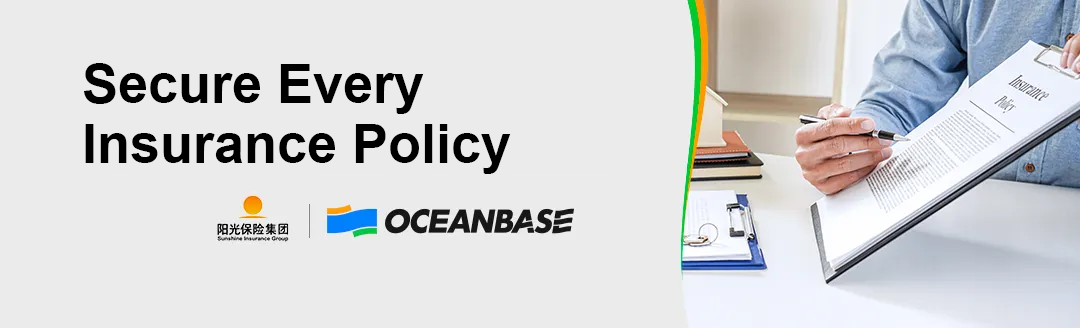
<style>
.page{position:relative;width:1080px;height:328px;background:#ebebeb}
.page>*{position:absolute;margin:0}
.t1{font:54px/60px "Arial-BoldMT";color:#000000}
</style>
<div class="page">
<p class="t1" style="left:84px;top:63px;width:427px;height:111px">Secure Every <br>Insurance Policy</p>
</div>
